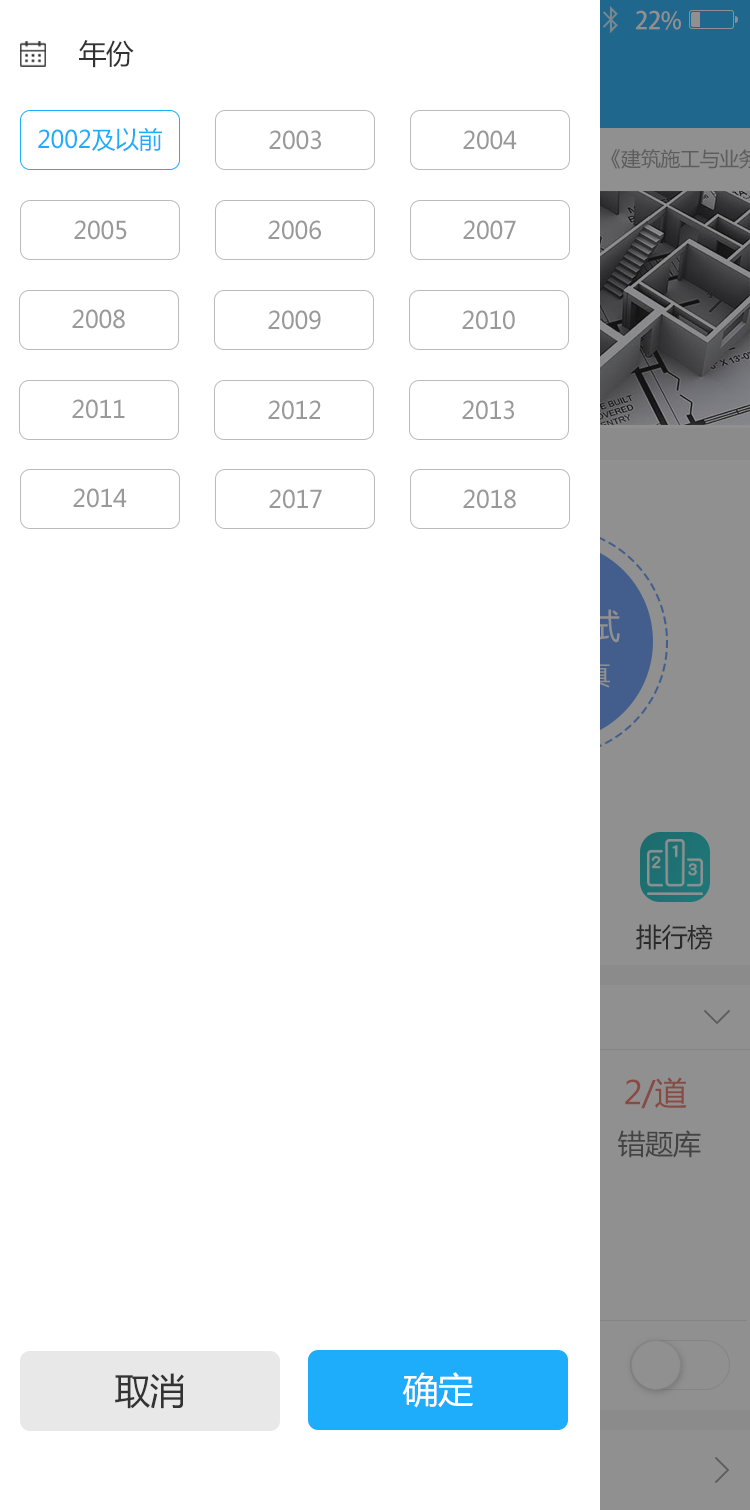
<style>
.page{position:relative;width:750px;height:1510px;background:#ffffff}
.page>*{position:absolute;margin:0}
.t1{font:24px "AdobeHeitiStd-Regular";letter-spacing:-0.02em;color:#909090}
.t2{font:28px "MicrosoftYaHei";letter-spacing:-0.02em;color:#333333}
.t3{font:24px "MicrosoftYaHei";letter-spacing:-0.02em;color:#1dadfa}
.t4{font:24px "MicrosoftYaHei";letter-spacing:-0.02em;color:#999999}
.t5{font:26px "MicrosoftYaHei";letter-spacing:-0.02em;color:#333333}
.t6{font:32px "MicrosoftYaHei";letter-spacing:-0.02em;color:#874b44}
.t7{font:28px "MicrosoftYaHei";letter-spacing:-0.02em;color:#434343}
.t8{font:36px "MicrosoftYaHei";letter-spacing:-0.02em;color:#333333}
.t9{font:36px "MicrosoftYaHei";letter-spacing:-0.02em;color:#ffffff}
</style>
<div class="page">
<p class="t1" style="left:636px;top:10px;width:45px;height:20px">22%</p>
<p class="t2" style="left:79px;top:40px;width:55px;height:28px">年份</p>
<p class="t3" style="left:38px;top:127px;width:124px;height:25px">2002及以前</p>
<p class="t4" style="left:269px;top:130px;width:52px;height:20px">2003</p>
<p class="t4" style="left:463px;top:130px;width:54px;height:20px">2004</p>
<p class="t4" style="left:74px;top:220px;width:53px;height:20px">2005</p>
<p class="t4" style="left:268px;top:220px;width:53px;height:20px">2006</p>
<p class="t4" style="left:463px;top:220px;width:53px;height:20px">2007</p>
<p class="t4" style="left:72px;top:309px;width:53px;height:20px">2008</p>
<p class="t4" style="left:268px;top:310px;width:53px;height:20px">2009</p>
<p class="t4" style="left:462px;top:310px;width:53px;height:20px">2010</p>
<p class="t4" style="left:72px;top:399px;width:53px;height:20px">2011</p>
<p class="t4" style="left:268px;top:400px;width:53px;height:20px">2012</p>
<p class="t4" style="left:462px;top:400px;width:52px;height:20px">2013</p>
<p class="t4" style="left:73px;top:488px;width:54px;height:20px">2014</p>
<p class="t4" style="left:269px;top:489px;width:53px;height:20px">2017</p>
<p class="t4" style="left:463px;top:489px;width:53px;height:20px">2018</p>
<p class="t5" style="left:636px;top:924px;width:77px;height:26px">排行榜</p>
<p class="t6" style="left:625px;top:1077px;width:62px;height:32px">2/道</p>
<p class="t7" style="left:618px;top:1130px;width:83px;height:28px">错题库</p>
<p class="t8" style="left:115px;top:1373px;width:69px;height:36px">取消</p>
<p class="t9" style="left:402px;top:1372px;width:71px;height:36px">确定</p>
</div>
